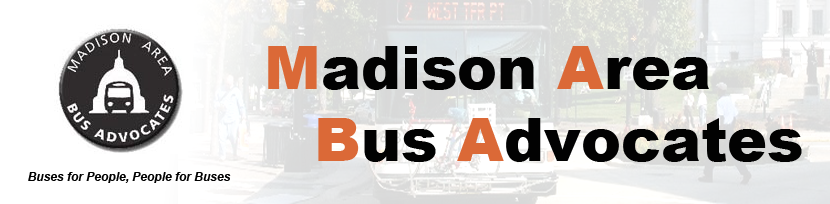
<style>
.page{position:relative;width:830px;height:204px}
.page>*{position:absolute;margin:0}
.t1{font:60px "Arial-Black";color:#020202}
.t2{font:60px "Arial-Black";color:#db6937}
.t3{font:12px "Arial-BoldItalicMT";color:#020202}
</style>
<div class="page">
<p class="t1" style="left:268px;top:46px;width:534px;height:116px"><span class="t2">M</span>adison <span class="t2">A</span>rea <br>  <span class="t2">B</span>us <span class="t2">A</span>dvocates</p>
<p class="t3" style="left:28px;top:172px;width:203px;height:11px">Buses for People, People for Buses</p>
</div>
